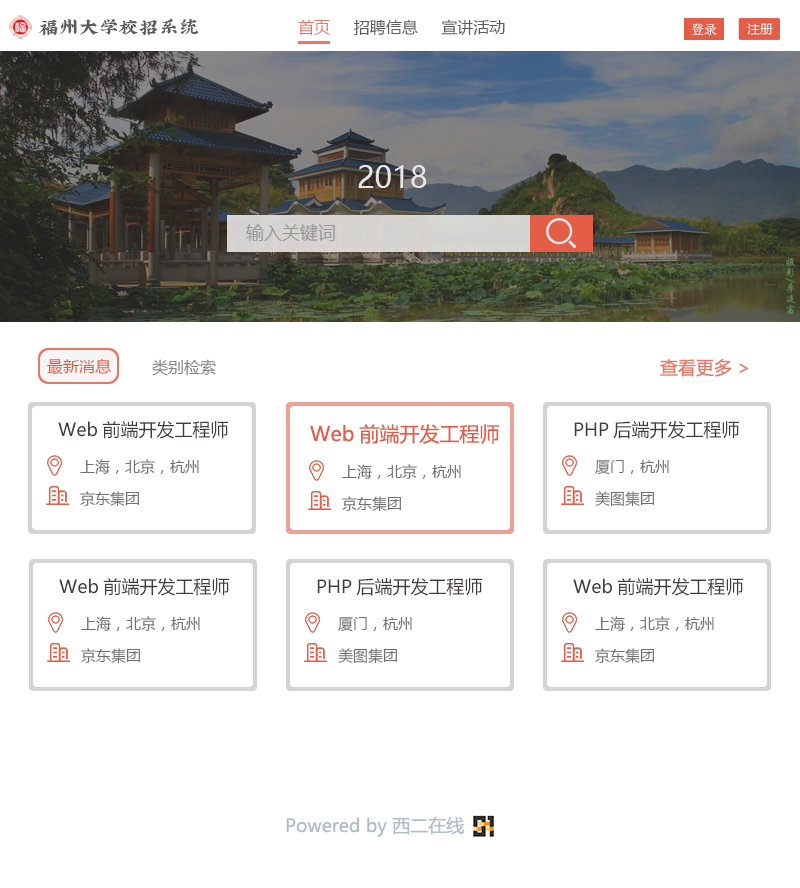
<style>
.page{position:relative;width:800px;height:888px;background:#ffffff}
.page>*{position:absolute;margin:0}
.t1{font:20px "XiQuezhaopaiti-Regular";color:#5d5b5b}
.t2{font:16px "MicrosoftYaHei";color:#5d5b5b}
.t3{font:16px "MicrosoftYaHei";color:#e87764}
.t4{font:30px "MicrosoftYaHeiUI";color:#ebe4e4}
.t5{font:18px "MicrosoftYaHei";color:#989898}
.t6{font:16px "MicrosoftYaHeiUI";color:#e45d47}
.t7{font:16px "MicrosoftYaHeiUI";color:#848282}
.t8{font:18px "MicrosoftYaHei";color:#e67868}
.t9{font:18px "MicrosoftYaHei";color:#413b3b}
.t10{font:20px "MicrosoftYaHei";color:#e45d47}
.t11{font:15px "MicrosoftYaHeiUI";color:#717070}
.t12{font:18px "MicrosoftYaHei";color:#b0bec7}
</style>
<div class="page">
<p class="t1" style="left:39px;top:18px;width:160px;height:18px">福州大学校招系统</p>
<p class="t2" style="left:298px;top:19px;width:207px;height:17px"><span class="t3">首页</span>     招聘信息     宣讲活动</p>
<p class="t4" style="left:358px;top:165px;width:69px;height:23px">2018</p>
<p class="t5" style="left:246px;top:224px;width:89px;height:18px">输入关键词</p>
<p class="t6" style="left:47px;top:358px;width:64px;height:17px">最新消息</p>
<p class="t7" style="left:152px;top:359px;width:64px;height:17px">类别检索</p>
<p class="t8" style="left:660px;top:359px;width:89px;height:18px">查看更多 &gt;</p>
<p class="t9" style="left:58px;top:421px;width:170px;height:18px">Web前端开发工程师</p>
<p class="t10" style="left:310px;top:424px;width:190px;height:20px">Web前端开发工程师</p>
<p class="t11" style="left:80px;top:459px;width:119px;height:15px">上海，北京，杭州</p>
<p class="t11" style="left:342px;top:464px;width:119px;height:15px">上海，北京，杭州</p>
<p class="t11" style="left:80px;top:491px;width:59px;height:16px">京东集团</p>
<p class="t11" style="left:342px;top:496px;width:59px;height:16px">京东集团</p>
<p class="t12" style="left:286px;top:816px;width:178px;height:21px">Powered by 西二在线</p>
</div>
